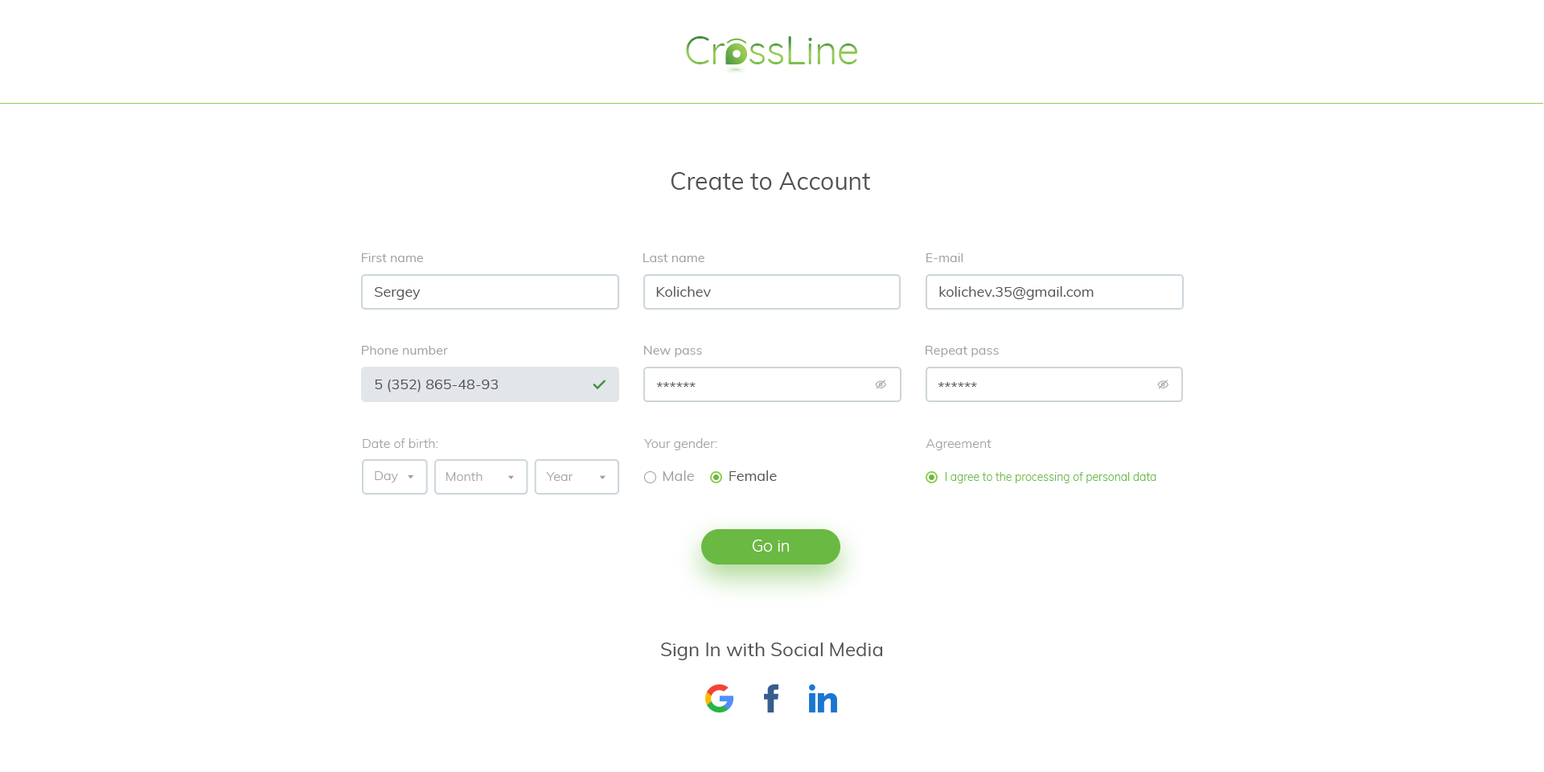
<style>
.page{position:relative;width:1544px;height:772px;background:#ffffff}
.page>*{position:absolute;margin:0}
.t1{font:39.3px "Quicksand-Regular"}
.t2{font:24.1px "Muli-Regular";color:#525256}
.t3{font:12.9px "Muli-Regular";color:#a1a1a1}
.t4{font:14.5px "Muli-Regular";color:#525256}
.t5{font:12.9px "Muli-Light";color:#a1a1a1}
.t6{font:14.5px "Muli-Regular";color:#a1a1a1}
.t7{font:11.3px "Muli-Light";color:#6ab942}
.t8{font:16.1px "Quicksand-Regular";color:#ffffff}
.t9{font:19.3px "Muli-Regular";color:#525256}
</style>
<div class="page">
<p class="t1" style="left:686px;top:36px;width:172px;height:28px">CrossLine</p>
<p class="t2" style="left:671px;top:172px;width:199px;height:18px">Create to Account</p>
<p class="t3" style="left:362px;top:253px;width:62px;height:9px">First name</p>
<p class="t3" style="left:643px;top:253px;width:62px;height:9px">Last name</p>
<p class="t3" style="left:927px;top:253px;width:37px;height:9px">E-mail</p>
<p class="t4" style="left:375px;top:287px;width:46px;height:13px">Sergey</p>
<p class="t4" style="left:656px;top:286px;width:55px;height:11px">Kolichev</p>
<p class="t4" style="left:939px;top:286px;width:155px;height:14px">kolichev.35@gmail.com</p>
<p class="t3" style="left:362px;top:346px;width:86px;height:9px">Phone number</p>
<p class="t3" style="left:644px;top:346px;width:58px;height:11px">New pass</p>
<p class="t3" style="left:926px;top:346px;width:73px;height:11px">Repeat pass</p>
<p class="t4" style="left:375px;top:380px;width:124px;height:13px">5 (352) 865-48-93</p>
<p class="t4" style="left:656px;top:382px;width:40px;height:6px">******</p>
<p class="t4" style="left:938px;top:382px;width:39px;height:6px">******</p>
<p class="t5" style="left:363px;top:438px;width:75px;height:10px">Date of birth:</p>
<p class="t5" style="left:644px;top:438px;width:73px;height:12px">Your gender:</p>
<p class="t5" style="left:926px;top:439px;width:66px;height:11px">Agreement</p>
<p class="t5" style="left:375px;top:471px;width:23px;height:12px">Day</p>
<p class="t5" style="left:446px;top:472px;width:37px;height:9px">Month</p>
<p class="t5" style="left:546px;top:472px;width:27px;height:9px">Year</p>
<p class="t4" style="left:663px;top:471px;width:114px;height:10px"><span class="t6">Male</span>         Female</p>
<p class="t7" style="left:945px;top:472px;width:212px;height:11px">I agree to the processing of personal data</p>
<p class="t8" style="left:752px;top:540px;width:37px;height:12px">Go in</p>
<p class="t9" style="left:661px;top:643px;width:222px;height:17px">Sign In with Social Media</p>
</div>
